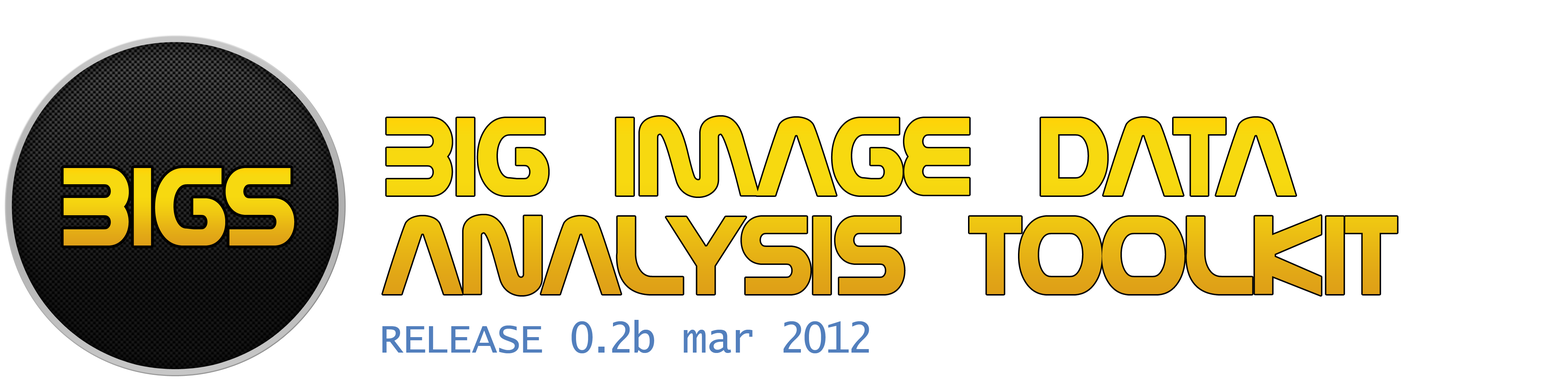
<style>
.page{position:relative;width:1568px;height:391px;background:#ffffff}
.page>*{position:absolute;margin:0}
.t1{font:116.5px/32.9px "Nasalization";color:#efc712}
.t2{font:116.5px "Nasalization"}
.t3{font:42.2px "LucidaConsole";color:#527fbd}
</style>
<div class="page">
<p class="t1" style="left:382px;top:116px;width:1015px;height:179px">BIG IMAGE DATA<br><br><br>ANALYSIS TOOLKIT</p>
<p class="t2" style="left:63px;top:168px;width:232px;height:77px">BIGS</p>
<p class="t3" style="left:382px;top:320px;width:487px;height:33px">RELEASE 0.2b mar 2012</p>
</div>
